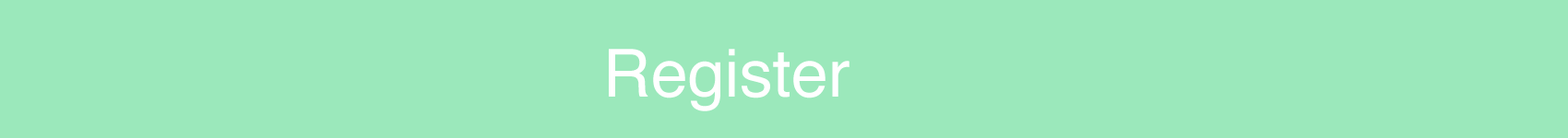
<style>
.page{position:relative;width:1568px;height:138px;background:#9be8bb}
.page>*{position:absolute;margin:0}
.t1{font:66.4px "Helvetica";color:#ffffff}
</style>
<div class="page">
<p class="t1" style="left:609px;top:49px;width:240px;height:63px">Register</p>
</div>
